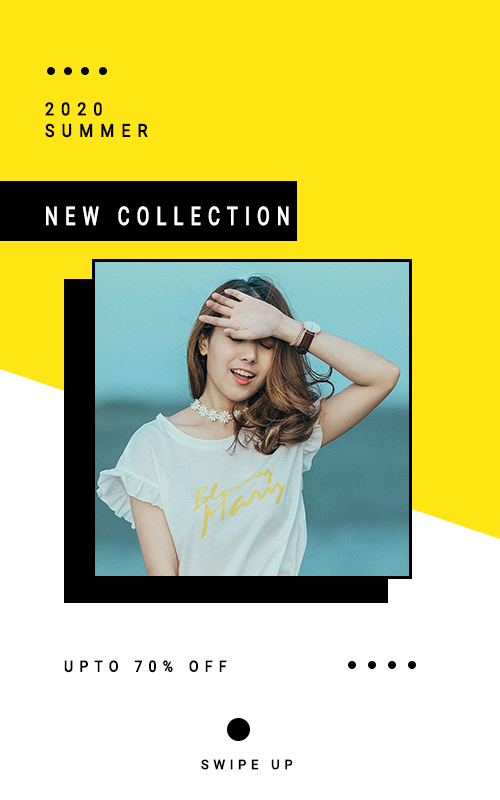
<style>
.page{position:relative;width:500px;height:800px;background:#ffe614}
.page>*{position:absolute;margin:0}
.t1{font:17.6px "Roboto-Regular";letter-spacing:0.42em;color:#000000;text-transform:uppercase;font-weight:bold;scale:0.91 1}
.t2{font:25px "Roboto-Regular";letter-spacing:0.38em;color:#ffffff;text-transform:uppercase;font-weight:bold;scale:0.72 1}
.t3{font:15.4px "Roboto-Regular";letter-spacing:0.42em;color:#000000;text-transform:uppercase;font-weight:bold;scale:0.91 1}
.t4{font:13px "Roboto-Regular";letter-spacing:0.34em;color:#000000;text-transform:uppercase;font-weight:bold}
</style>
<div class="page">
<p class="t1" style="left:45px;top:102px;width:57px;height:14px">2020</p>
<p class="t1" style="left:45px;top:123px;width:103px;height:15px">SUMMER</p>
<p class="t2" style="left:46px;top:206px;width:243px;height:20px">NEW COLLECTION</p>
<p class="t3" style="left:64px;top:660px;width:163px;height:13px">UPTO 70% OFF</p>
<p class="t4" style="left:201px;top:759px;width:92px;height:11px">SWIPE UP</p>
</div>
